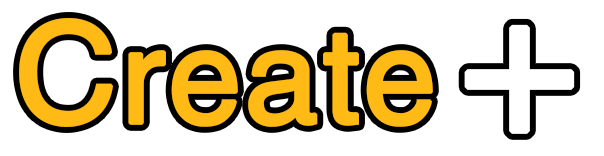
<style>
.page{position:relative;width:604px;height:156px;background:#ffffff}
.page>*{position:absolute;margin:0}
.t1{font:132.5px "HelveticaCE";color:#ffba15;font-weight:bold}
.t2{font:141.2px "HelveticaCE";color:#ffba15;font-weight:bold}
</style>
<div class="page">
<p class="t1" style="left:19px;top:18px;width:414px;height:109px"><span class="t2">C</span>reate</p>
</div>
